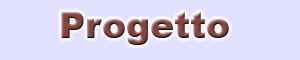
<style>
.page{position:relative;width:300px;height:60px;background:#e1e1ff}
.page>*{position:absolute;margin:0}
.t1{font:36px "Arial-Black"}
</style>
<div class="page">
<p class="t1" style="left:61px;top:12px;width:168px;height:33px">Progetto</p>
</div>
